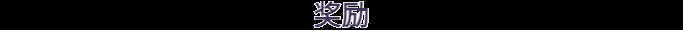
<style>
.page{position:relative;width:683px;height:30px;background:#000000}
.page>*{position:absolute;margin:0}
.t1{font:28px "WebPSD-18463539-0-Regular";color:#3f3254;font-weight:bold}
</style>
<div class="page">
<p class="t1" style="left:0px;top:0px;width:683px;height:30px">奖励</p>
</div>
